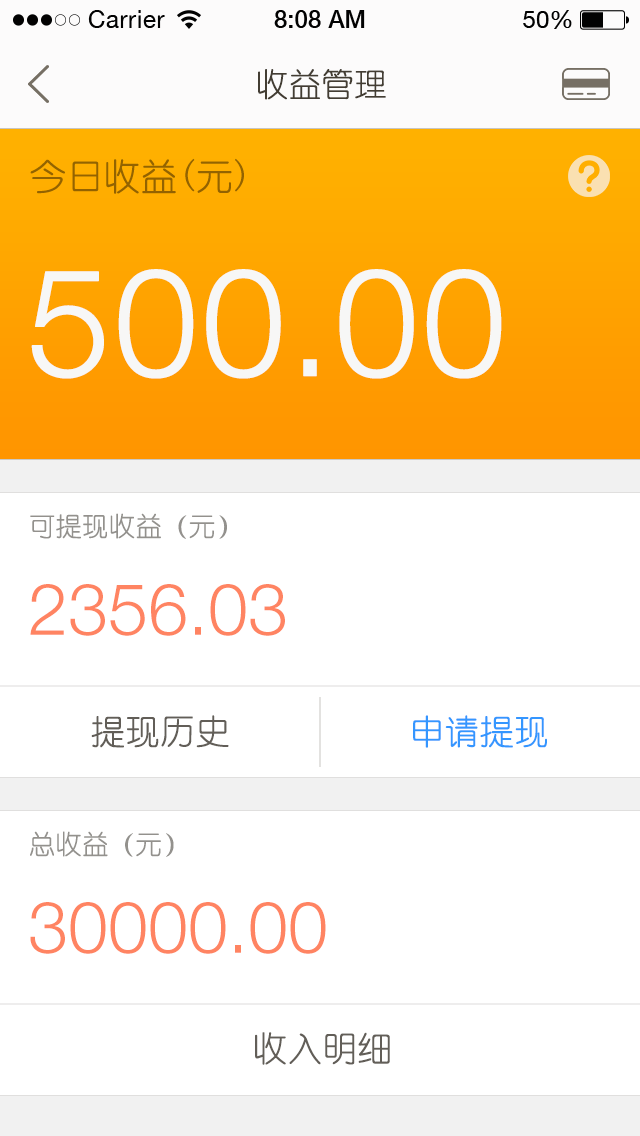
<style>
.page{position:relative;width:640px;height:1136px;background:#ffffff}
.page>*{position:absolute;margin:0}
.t1{font:32px "YouYuan";color:#433d33;text-transform:uppercase;font-weight:bold}
.t2{font:36px "YouYuan";color:#936300;text-transform:uppercase;font-weight:bold}
.t3{font:150px "HelveticaNeueLTPro-Lt";color:#f7f7f6;font-variant:small-caps;font-weight:bold}
.t4{font:26px "YouYuan";color:#93918d;text-transform:uppercase;font-weight:bold}
.t5{font:72px "HelveticaNeueLTPro-Lt";color:#ff8462;text-transform:uppercase}
.t6{font:34px "YouYuan";color:#625e58;text-transform:uppercase;font-weight:bold}
.t7{font:34px "YouYuan";color:#3496ff;text-transform:uppercase;font-weight:bold}
</style>
<div class="page">
<p class="t1" style="left:258px;top:69px;width:128px;height:31px">收益管理</p>
<p class="t2" style="left:30px;top:158px;width:214px;height:36px">今日收益(元)</p>
<p class="t3" style="left:31px;top:269px;width:471px;height:110px">500.00</p>
<p class="t4" style="left:30px;top:513px;width:197px;height:26px">可提现收益（元）</p>
<p class="t5" style="left:30px;top:584px;width:255px;height:52px">2356.03</p>
<p class="t6" style="left:91px;top:715px;width:138px;height:33px">提现历史</p>
<p class="t7" style="left:413px;top:715px;width:134px;height:33px">申请提现</p>
<p class="t4" style="left:30px;top:831px;width:144px;height:26px">总收益（元）</p>
<p class="t5" style="left:30px;top:902px;width:296px;height:52px">30000.00</p>
<p class="t6" style="left:255px;top:1032px;width:135px;height:33px">收入明细</p>
</div>
